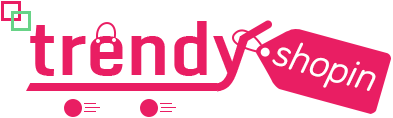
<style>
.page{position:relative;width:393px;height:118px;background:#ffffff}
.page>*{position:absolute;margin:0}
.t1{font:72px "Monda-Bold";color:#e91e63}
.t2{font:40px "BariolRegular-Italic";color:#ffffff}
</style>
<div class="page">
<p class="t1" style="left:30px;top:21px;width:220px;height:71px">trendy</p>
<p class="t2" style="left:272px;top:42px;width:104px;height:49px;rotate:15deg">shopin</p>
</div>
